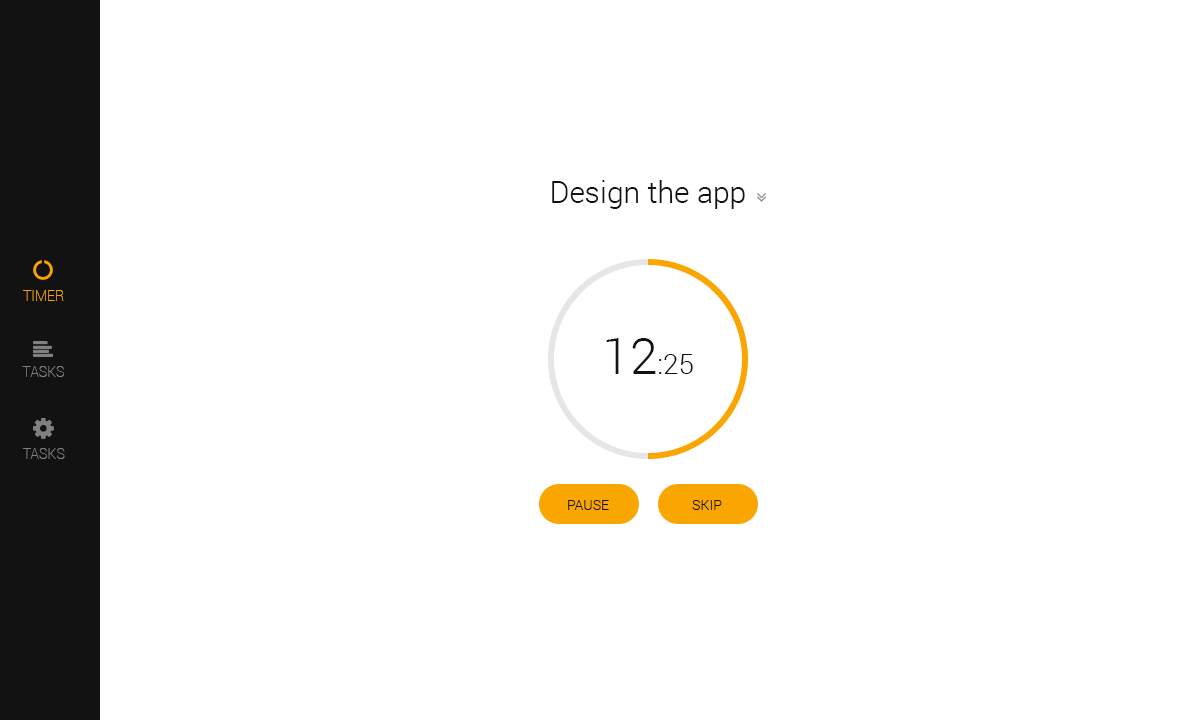
<style>
.page{position:relative;width:1200px;height:720px;background:#ffffff}
.page>*{position:absolute;margin:0}
.t1{font:30px "Roboto-Light";color:#121212}
.t2{font:14px "Roboto-Thin";color:#f9a603;text-transform:uppercase}
.t3{font:28px "Roboto-Light";color:#121212;text-transform:uppercase}
.t4{font:50px "Roboto-Light";color:#121212;text-transform:uppercase}
.t5{font:14px "Roboto-Thin";color:#808080;text-transform:uppercase}
.t6{font:14.1px "Roboto-Thin";color:#808080;text-transform:uppercase}
.t7{font:14px "Roboto-Light";color:#121212;text-transform:uppercase}
</style>
<div class="page">
<p class="t1" style="left:552px;top:180px;width:193px;height:29px">Design the app</p>
<p class="t2" style="left:23px;top:290px;width:41px;height:11px">Timer</p>
<p class="t3" style="left:606px;top:338px;width:87px;height:36px"><span class="t4">12</span>:25</p>
<p class="t5" style="left:22px;top:366px;width:42px;height:11px">Tasks</p>
<p class="t6" style="left:23px;top:448px;width:42px;height:11px">Tasks</p>
<p class="t7" style="left:568px;top:500px;width:41px;height:10px">pause</p>
<p class="t7" style="left:692px;top:500px;width:30px;height:10px">skip</p>
</div>
